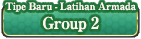
<style>
.page{position:relative;width:141px;height:39px}
.page>*{position:absolute;margin:0}
.t1{font:10px "RyuminPro-ExBold";letter-spacing:-0.04em;color:#fff6f1}
.t2{font:16px "RyuminPro-ExBold";letter-spacing:-0.04em;color:#fff6f1}
</style>
<div class="page">
<p class="t1" style="left:5px;top:2px;width:131px;height:10px">Tipe Baru - Latihan Armada</p>
<p class="t2" style="left:43px;top:16px;width:56px;height:16px">Group 2</p>
</div>
